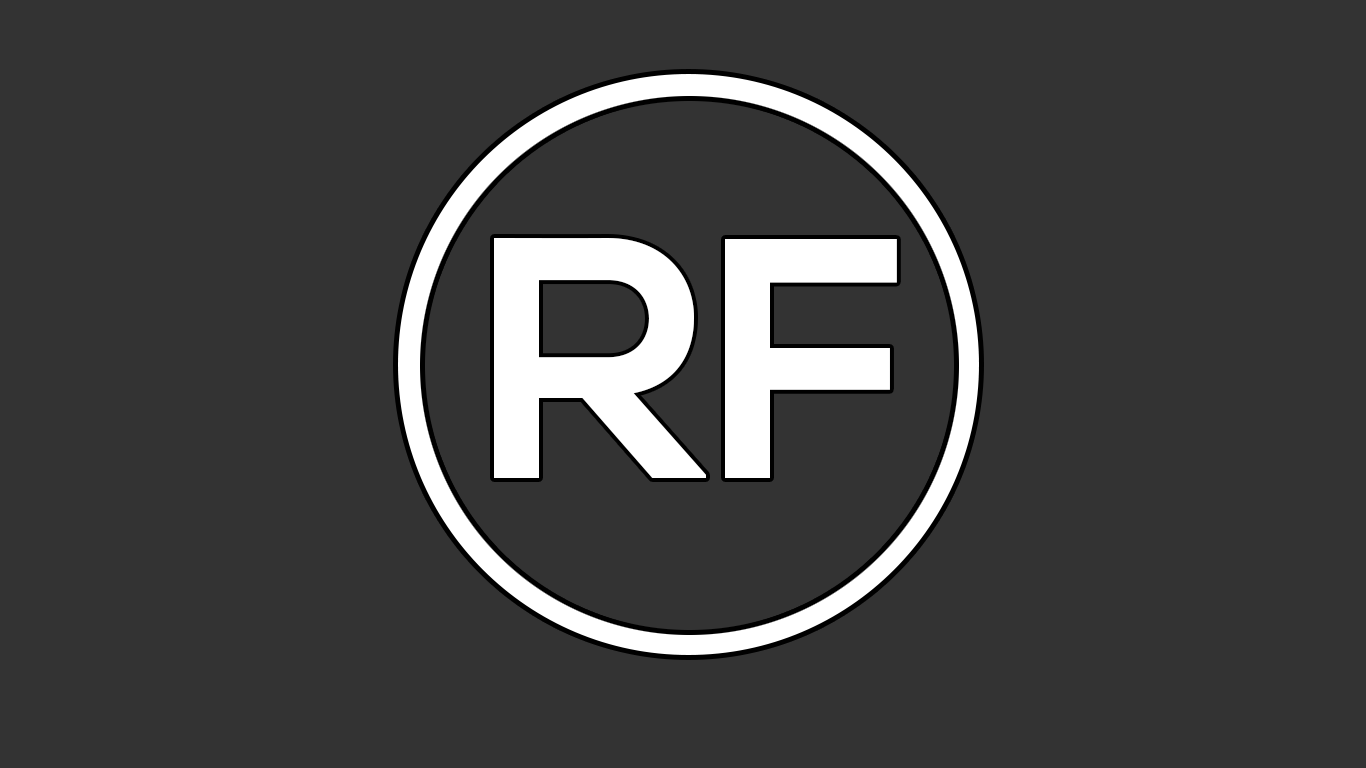
<style>
.page{position:relative;width:1366px;height:768px;background:#333333}
.page>*{position:absolute;margin:0}
.t1{font:341.7px "NexaBold";color:#ffffff;text-transform:uppercase}
</style>
<div class="page">
<p class="t1" style="left:494px;top:238px;width:403px;height:240px">RF</p>
</div>
